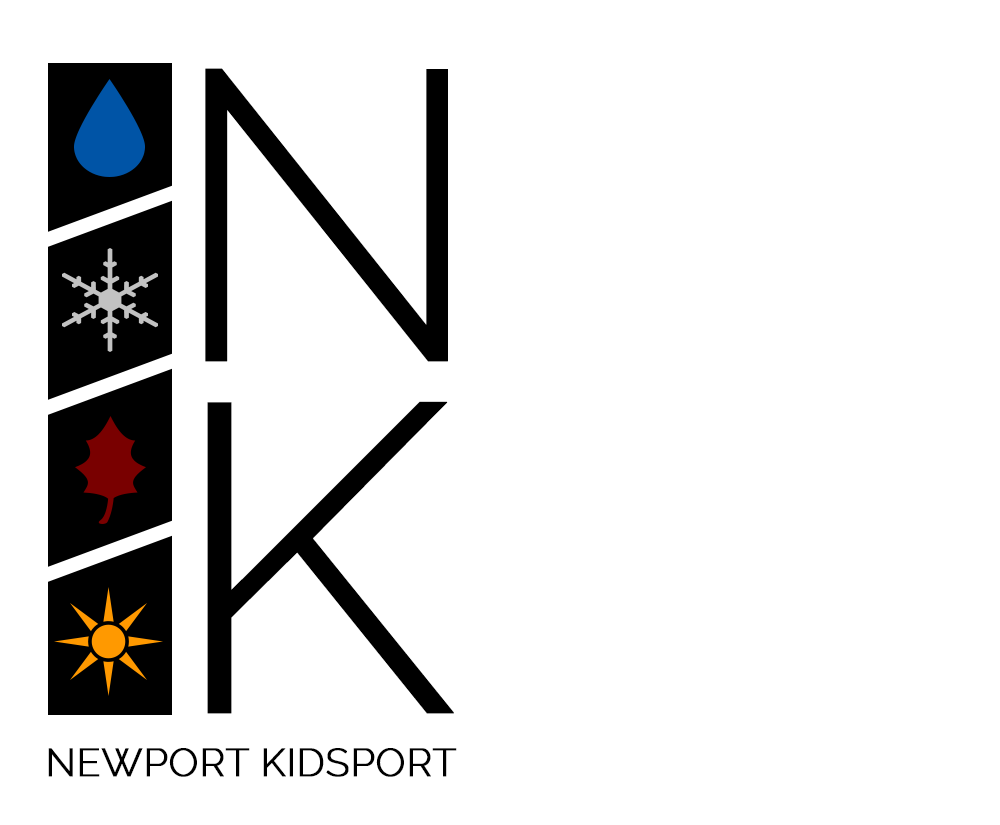
<style>
.page{position:relative;width:1000px;height:825px;background:#ffffff}
.page>*{position:absolute;margin:0}
.t1{font:411.3px "Raleway-Light";color:#000000;text-transform:uppercase;font-weight:bold}
.t2{font:437.8px "Raleway-Light";color:#000000;text-transform:uppercase;font-weight:bold;scale:1.04 1}
.t3{font:39px "Raleway-Light";color:#000000;text-transform:uppercase;font-weight:bold}
</style>
<div class="page">
<p class="t1" style="left:205px;top:68px;width:243px;height:294px">n</p>
<p class="t2" style="left:207px;top:401px;width:247px;height:313px">k</p>
<p class="t3" style="left:48px;top:748px;width:409px;height:29px">newport kidsport</p>
</div>
